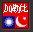
<style>
.page{position:relative;width:33px;height:32px;background:#333333}
.page>*{position:absolute;margin:0}
.t1{font:10.4px "SimSun";letter-spacing:-0.25em;color:#ffffff}
</style>
<div class="page">
<p class="t1" style="left:3px;top:4px;width:25px;height:9px">加勒比</p>
</div>
